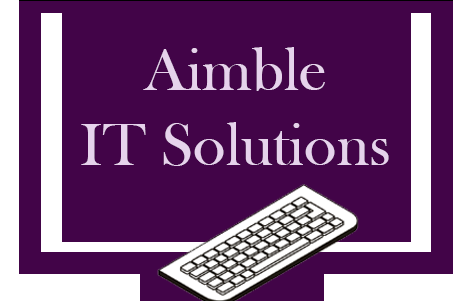
<style>
.page{position:relative;width:476px;height:301px;background:#420448}
.page>*{position:absolute;margin:0}
.t1{font:62.5px "BaskOldFace";color:#e6d3ec}
</style>
<div class="page">
<p class="t1" style="left:81px;top:47px;width:308px;height:119px;text-align:center">Aimble<br>IT Solutions</p>
</div>
